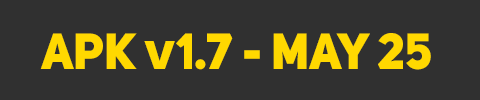
<style>
.page{position:relative;width:480px;height:100px;background:#303030}
.page>*{position:absolute;margin:0}
.t1{font:50px "UniSansHeavyCAPS";color:#ffd800}
.t2{font:50px "Poppins-Bold";color:#ffd800}
</style>
<div class="page">
<p class="t1" style="left:40px;top:33px;width:391px;height:37px">APK <span class="t2">v</span>1.7 - may 25</p>
</div>
